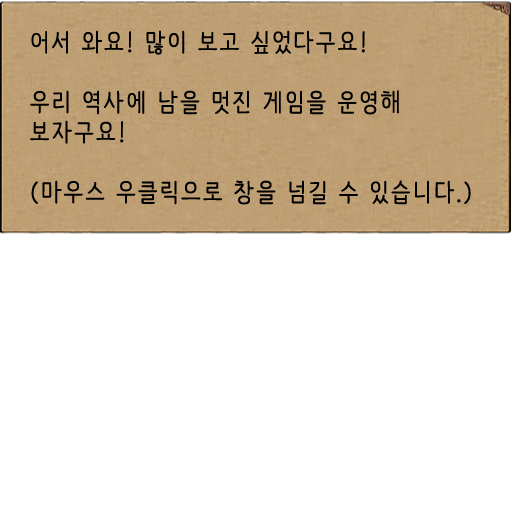
<style>
.page{position:relative;width:512px;height:512px;background:#ffffff}
.page>*{position:absolute;margin:0}
.t1{font:25px "NanumBarunpen";letter-spacing:0.075em;color:#000000;font-weight:bold}
</style>
<div class="page">
<p class="t1" style="left:30px;top:30px;width:441px;height:175px">어서 와요! 많이 보고 싶었다구요!<br><br>우리 역사에 남을 멋진 게임을 운영해 보자구요!<br><br>(마우스 우클릭으로 창을 넘길 수 있습니다.)</p>
</div>
